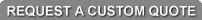
<style>
.page{position:relative;width:202px;height:20px;background:#858585}
.page>*{position:absolute;margin:0}
.t1{font:13.3px "Arial-BoldMT";color:#ffffff}
</style>
<div class="page">
<p class="t1" style="left:7px;top:5px;width:189px;height:12px">REQUEST A CUSTOM QUOTE</p>
</div>
